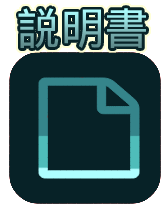
<style>
.page{position:relative;width:168px;height:211px;background:#072227}
.page>*{position:absolute;margin:0}
.t1{font:44px "DroidSansFallback"}
</style>
<div class="page">
<p class="t1" style="left:18px;top:8px;width:129px;height:40px">説明書</p>
</div>
